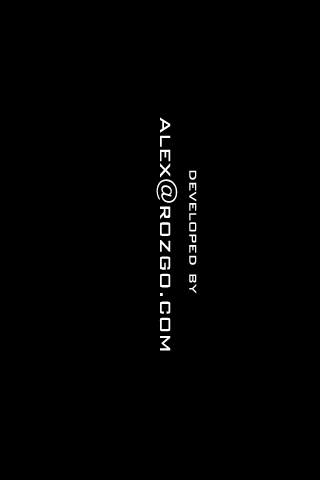
<style>
.page{position:relative;width:320px;height:480px;background:#000000}
.page>*{position:absolute;margin:0}
.t1{font:24px "BankGothic-Light";color:#ffffff;scale:1.09 1}
.t2{font:16px "BankGothic-Light";color:#ffffff;scale:1.09 1}
</style>
<div class="page">
<p class="t1" style="left:156px;top:117px;width:22px;height:234px;rotate:90deg">alex@rozgo.com</p>
<p class="t2" style="left:189px;top:170px;width:8px;height:124px;rotate:90deg">developed by</p>
</div>
